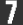
<style>
.page{position:relative;width:23px;height:25px;background:#333333}
.page>*{position:absolute;margin:0}
.t1{font:38.9px "VT323-Regular";color:#ffffff;font-weight:bold;scale:0.9 1}
</style>
<div class="page">
<p class="t1" style="left:5px;top:0px;width:12px;height:24px">7</p>
</div>
